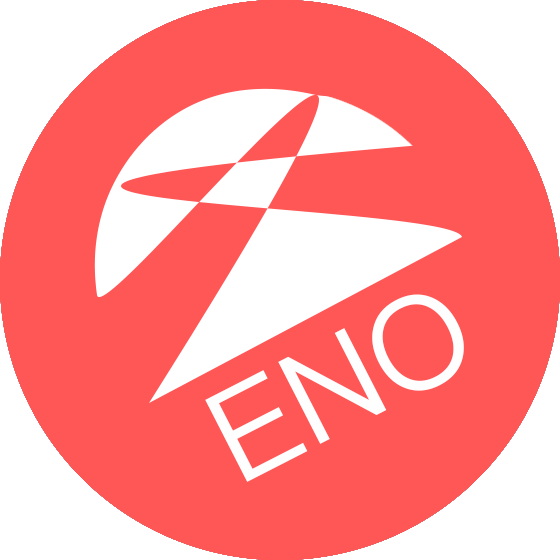
<style>
.page{position:relative;width:560px;height:560px;background:#ff5656}
.page>*{position:absolute;margin:0}
.t1{font:128.8px "PingFangSC-Regular";color:#fefefe}
</style>
<div class="page">
<p class="t1" style="left:205px;top:294px;width:259px;height:188px;rotate:-27deg">ENO</p>
</div>
